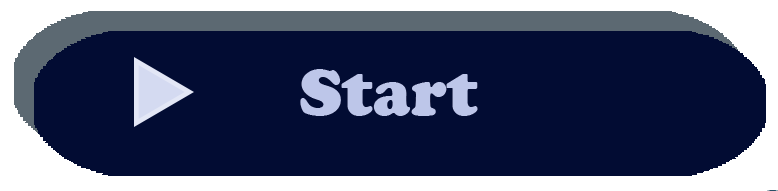
<style>
.page{position:relative;width:778px;height:191px;background:#020c33}
.page>*{position:absolute;margin:0}
.t1{font:66.7px "CooperBlack";color:#d4daf1}
</style>
<div class="page">
<p class="t1" style="left:300px;top:69px;width:178px;height:47px">Start</p>
</div>
